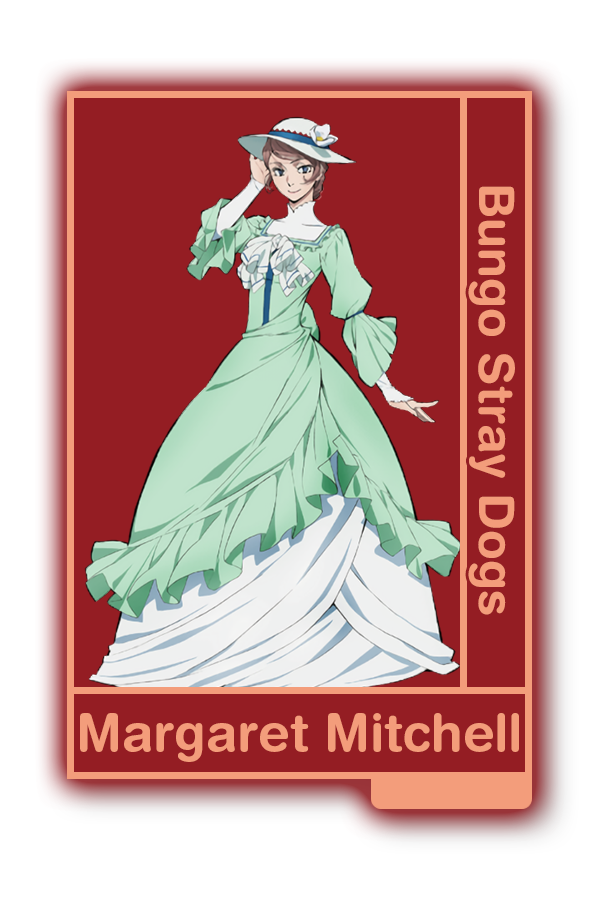
<style>
.page{position:relative;width:600px;height:900px;background:#941d23}
.page>*{position:absolute;margin:0}
.t1{font:48.8px "HelveticaRounded-Bold";color:#f39d7b}
.t2{font:51.5px "HelveticaRounded-Bold";color:#f39d7b}
</style>
<div class="page">
<p class="t1" style="left:468px;top:186px;width:47px;height:429px;rotate:90deg">Bungo Stray Dogs</p>
<p class="t2" style="left:80px;top:713px;width:439px;height:49px">Margaret Mitchell</p>
</div>
